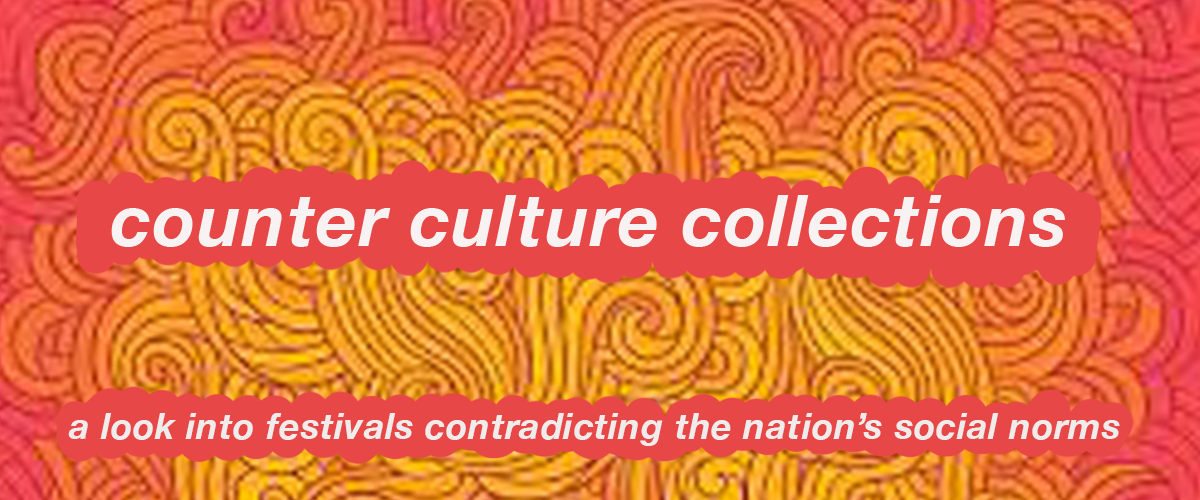
<style>
.page{position:relative;width:1200px;height:500px;background:#e74747}
.page>*{position:absolute;margin:0}
.t1{font:36px "HelveticaNeue-BoldItalic";letter-spacing:0.02em;color:#f1ecec}
</style>
<div class="page">
<p class="t1" style="left:68px;top:413px;width:1052px;height:33px">a look into festivals contradicting the nation’s social norms</p>
</div>
